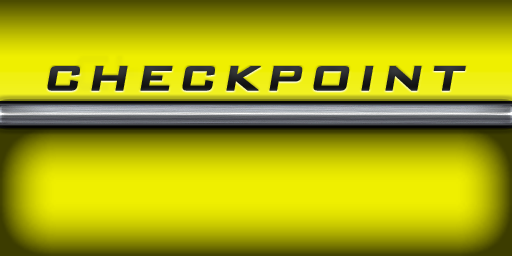
<style>
.page{position:relative;width:512px;height:256px}
.page>*{position:absolute;margin:0}
.t1{font:56.9px "BankGothicBT-Medium";letter-spacing:0.1em;color:#212324;font-weight:bold;font-style:italic}
</style>
<div class="page">
<p class="t1" style="left:47px;top:66px;width:419px;height:25px">checkpoint</p>
</div>
